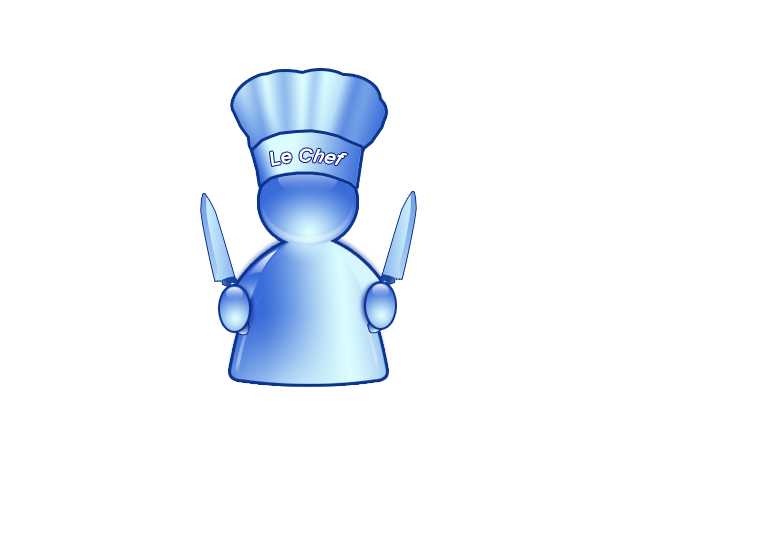
<style>
.page{position:relative;width:767px;height:560px;background:#ffffff}
.page>*{position:absolute;margin:0}
.t1{font:18px "Arial-ItalicMT";color:#fafdfd}
</style>
<div class="page">
<p class="t1" style="left:270px;top:148px;width:78px;height:18px">Le Chef</p>
</div>
